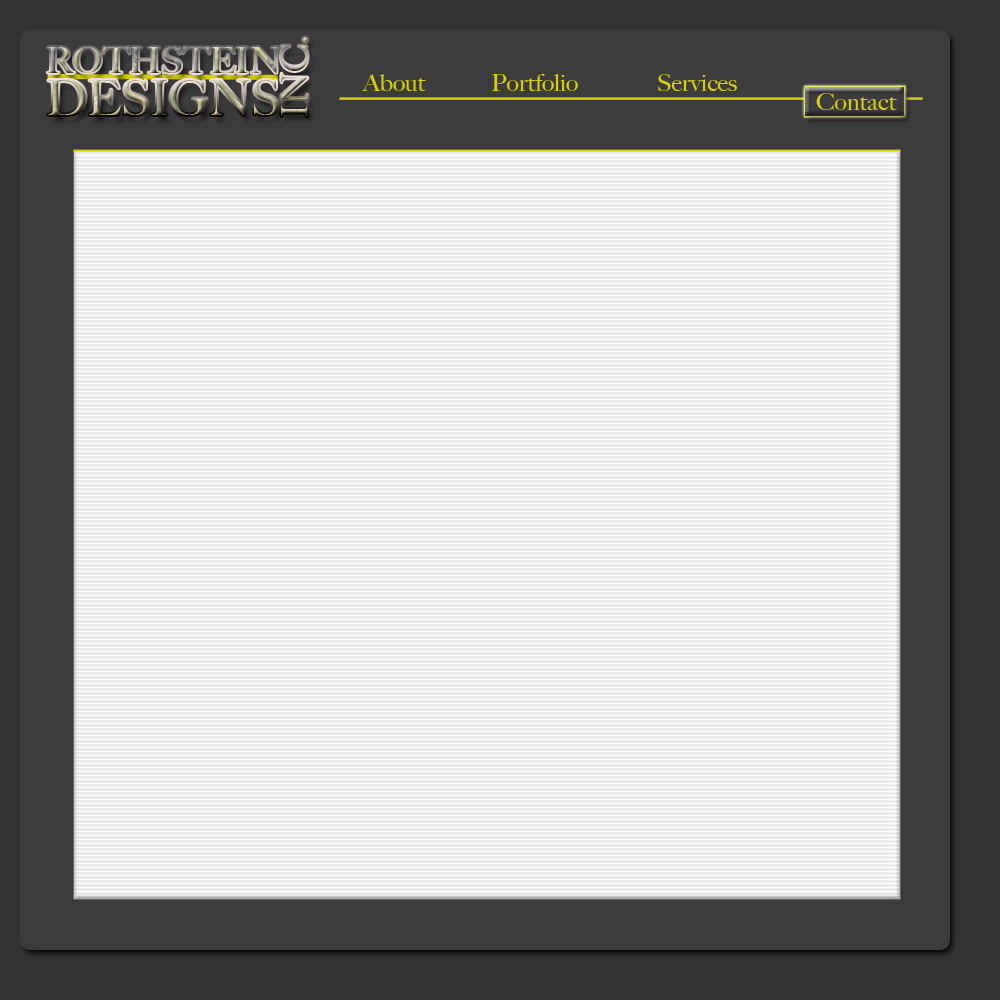
<style>
.page{position:relative;width:1000px;height:1000px;background:#efefef}
.page>*{position:absolute;margin:0}
.t1{font:24px "BigCaslon-Medium";color:#d7d00a}
</style>
<div class="page">
<p class="t1" style="left:362px;top:74px;width:64px;height:17px">About</p>
<p class="t1" style="left:491px;top:74px;width:87px;height:17px">Portfolio</p>
<p class="t1" style="left:658px;top:74px;width:79px;height:17px">Services</p>
</div>
